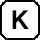
<style>
.page{position:relative;width:40px;height:40px;background:#ffffff}
.page>*{position:absolute;margin:0}
.t1{font:26px "Helvetica-Bold";color:#000000}
</style>
<div class="page">
<p class="t1" style="left:12px;top:10px;width:17px;height:19px">K</p>
</div>
